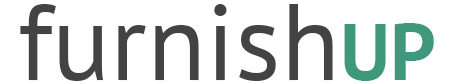
<style>
.page{position:relative;width:453px;height:84px;background:#ffffff}
.page>*{position:absolute;margin:0}
.t1{font:108px "PTSans-Regular";color:#434343}
.t2{font:79.5px "PTSans-Bold";color:#3e997c}
</style>
<div class="page">
<p class="t1" style="left:20px;top:4px;width:414px;height:77px">furnish<span class="t2">UP</span></p>
</div>
